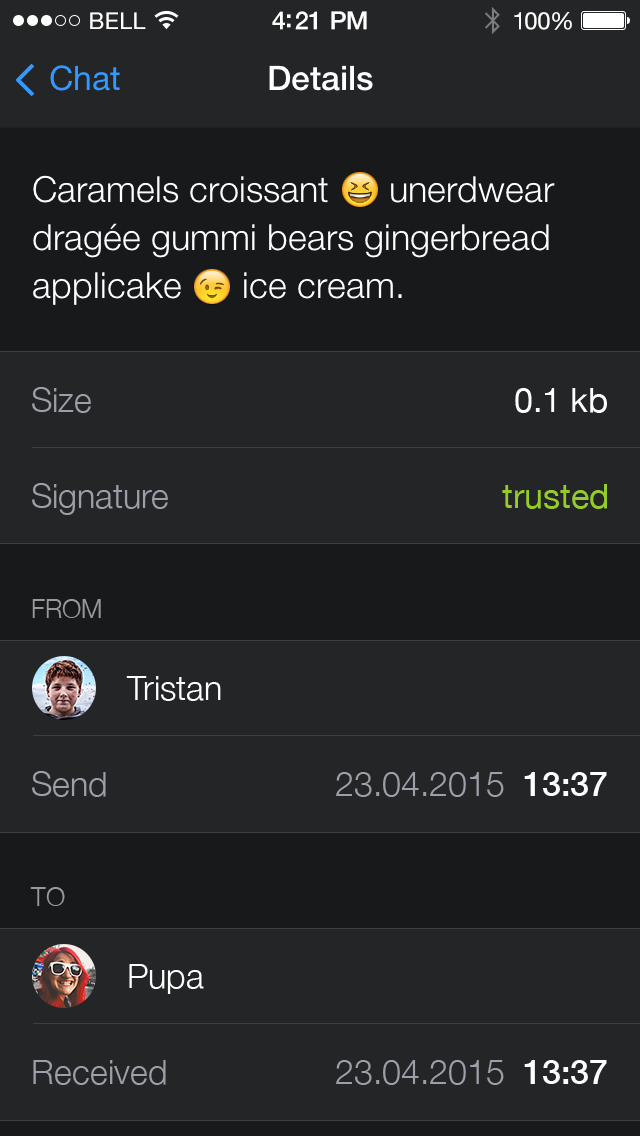
<style>
.page{position:relative;width:640px;height:1136px;background:#242526}
.page>*{position:absolute;margin:0}
.t1{font:23px "HelveticaNeue";letter-spacing:0.02em;color:#ffffff}
.t2{font:25px "HelveticaNeue-Medium";letter-spacing:-0.02em;color:#fefefe}
.t3{font:24px "HelveticaNeue";letter-spacing:-0.02em;color:#ffffff}
.t4{font:33.8px "HelveticaNeue";color:#3399ff}
.t5{font:33.8px "HelveticaNeue-Medium";color:#ffffff}
.t6{font:36px/48px "HelveticaNeue-Light";color:#ffffff}
.t7{font:34px "HelveticaNeue-Light";color:#9b9fa8}
.t8{font:34px "HelveticaNeue";color:#ffffff}
.t9{font:34px "HelveticaNeue";color:#96cc29}
.t10{font:26px "HelveticaNeue-Light";color:#999999;text-transform:uppercase}
.t11{font:34px "HelveticaNeue-Light";color:#ffffff}
.t12{font:34px "HelveticaNeue-Medium";color:#ffffff}
</style>
<div class="page">
<p class="t1" style="left:90px;top:12px;width:56px;height:17px">BELL</p>
<p class="t2" style="left:272px;top:11px;width:95px;height:19px">4:21 PM</p>
<p class="t3" style="left:514px;top:12px;width:58px;height:18px">100%</p>
<p class="t4" style="left:50px;top:65px;width:70px;height:26px">Chat</p>
<p class="t5" style="left:269px;top:65px;width:104px;height:26px">Details</p>
<p class="t6" style="left:33px;top:175px;width:522px;height:130px">Caramels croissant      unerdwear dragée gummi bears gingerbread applicake      ice cream.</p>
<p class="t7" style="left:32px;top:387px;width:59px;height:26px">Size</p>
<p class="t8" style="left:515px;top:388px;width:92px;height:25px">0.1 kb</p>
<p class="t7" style="left:32px;top:483px;width:136px;height:32px">Signature</p>
<p class="t9" style="left:502px;top:484px;width:105px;height:25px">trusted</p>
<p class="t10" style="left:32px;top:599px;width:69px;height:19px">From</p>
<p class="t11" style="left:126px;top:676px;width:95px;height:25px">Tristan</p>
<p class="t7" style="left:32px;top:771px;width:74px;height:26px">Send</p>
<p class="t7" style="left:336px;top:772px;width:271px;height:25px">23.04.2015  <span class="t12">13:37</span></p>
<p class="t10" style="left:30px;top:887px;width:35px;height:19px">To</p>
<p class="t11" style="left:129px;top:964px;width:75px;height:30px">Pupa</p>
<p class="t7" style="left:33px;top:1060px;width:133px;height:25px">Received</p>
<p class="t7" style="left:336px;top:1060px;width:271px;height:25px">23.04.2015  <span class="t12">13:37</span></p>
</div>
